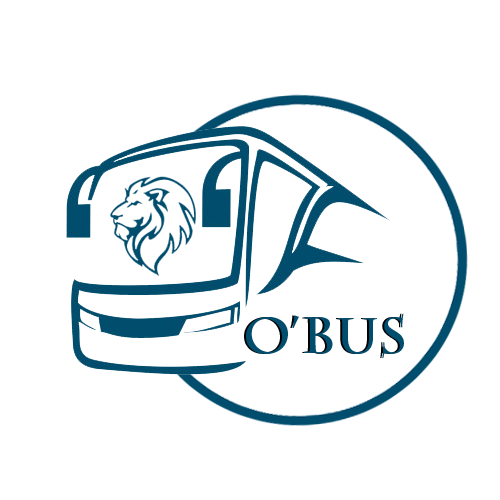
<style>
.page{position:relative;width:500px;height:500px;background:#ffffff}
.page>*{position:absolute;margin:0}
.t1{font:50px "CharlemagneStd-Bold"}
.t2{font:50px "CharlemagneStd-Bold";color:#014d6d}
</style>
<div class="page">
<p class="t1" style="left:244px;top:313px;width:158px;height:46px">O’Bus</p>
<p class="t2" style="left:246px;top:313px;width:158px;height:46px">O’Bus</p>
</div>
